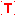
<style>
.page{position:relative;width:16px;height:16px;background:#ffffff}
.page>*{position:absolute;margin:0}
.t1{font:13.9px "Bahnschrift-Bold";letter-spacing:0.05em;color:#ff0000;font-weight:bold;scale:1.07 1}
</style>
<div class="page">
<p class="t1" style="left:4px;top:3px;width:8px;height:10px">T</p>
</div>
